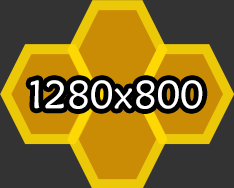
<style>
.page{position:relative;width:234px;height:188px;background:#333333}
.page>*{position:absolute;margin:0}
.t1{font:40px "MaiandraGD-Regular";color:#ffffff}
</style>
<div class="page">
<p class="t1" style="left:30px;top:80px;width:173px;height:29px">1280x800</p>
</div>
